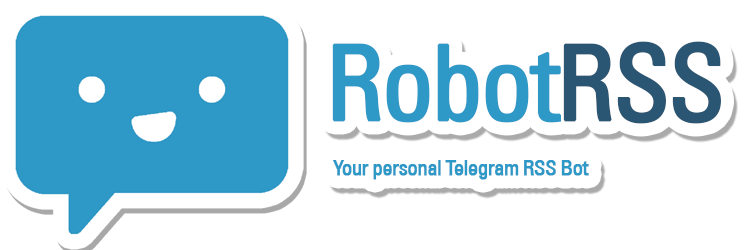
<style>
.page{position:relative;width:750px;height:250px;background:#ffffff}
.page>*{position:absolute;margin:0}
.t1{font:104.2px "UniversLT-Condensed";letter-spacing:-0.05em;color:#2e98c6;font-weight:bold}
.t2{font:104.2px "UniversLT-Condensed";letter-spacing:-0.05em;color:#2b5673;font-weight:bold}
.t3{font:20.8px "UniversLT-Condensed";letter-spacing:-0.05em;color:#2e98c6;font-weight:bold}
</style>
<div class="page">
<p class="t1" style="left:332px;top:41px;width:389px;height:83px">Robot<span class="t2">RSS</span></p>
<p class="t3" style="left:333px;top:160px;width:256px;height:20px">Your personal Telegram RSS Bot</p>
</div>
